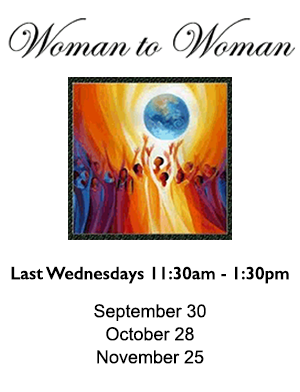
<style>
.page{position:relative;width:300px;height:392px;background:#ffffff}
.page>*{position:absolute;margin:0}
.t1{font:18px/11px "ArialMT";color:#000000}
.t2{font:18px/13.5px "GillSans-SemiBold";color:#000000}
</style>
<div class="page">
<p class="t1" style="left:11px;top:266px;width:278px;height:98px;text-align:center"><span class="t2">Last Wednesdays 11:30am - 1:30pm<br><br></span>September 30<br>October 28<br>November 25</p>
</div>
